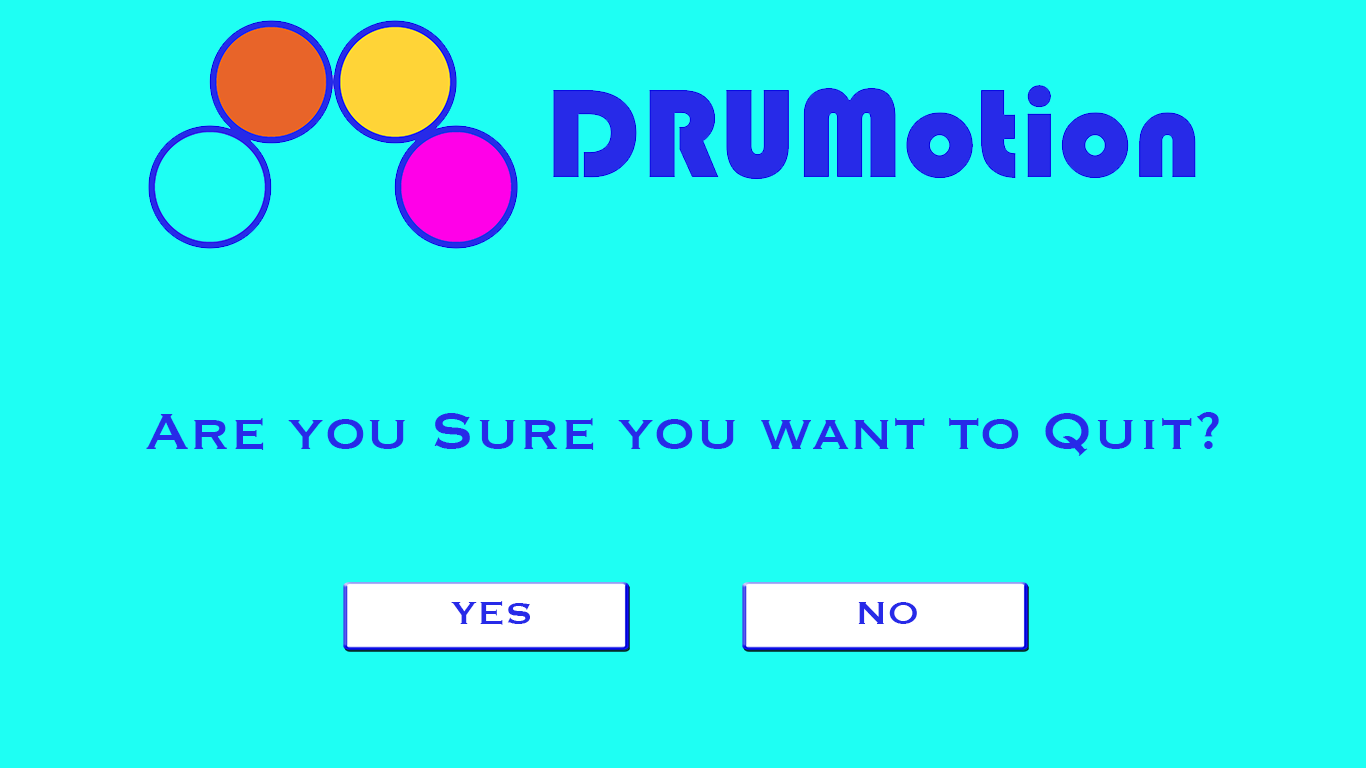
<style>
.page{position:relative;width:1366px;height:768px;background:#1efff3}
.page>*{position:absolute;margin:0}
.t1{font:66.7px "Copperplate";color:#272ae8}
.t2{font:41.7px "Copperplate";color:#272ae8}
</style>
<div class="page">
<p class="t1" style="left:146px;top:412px;width:1073px;height:44px">Are you Sure you want to Quit?</p>
<p class="t2" style="left:451px;top:601px;width:79px;height:24px">YES</p>
<p class="t2" style="left:858px;top:602px;width:59px;height:22px">NO</p>
</div>
